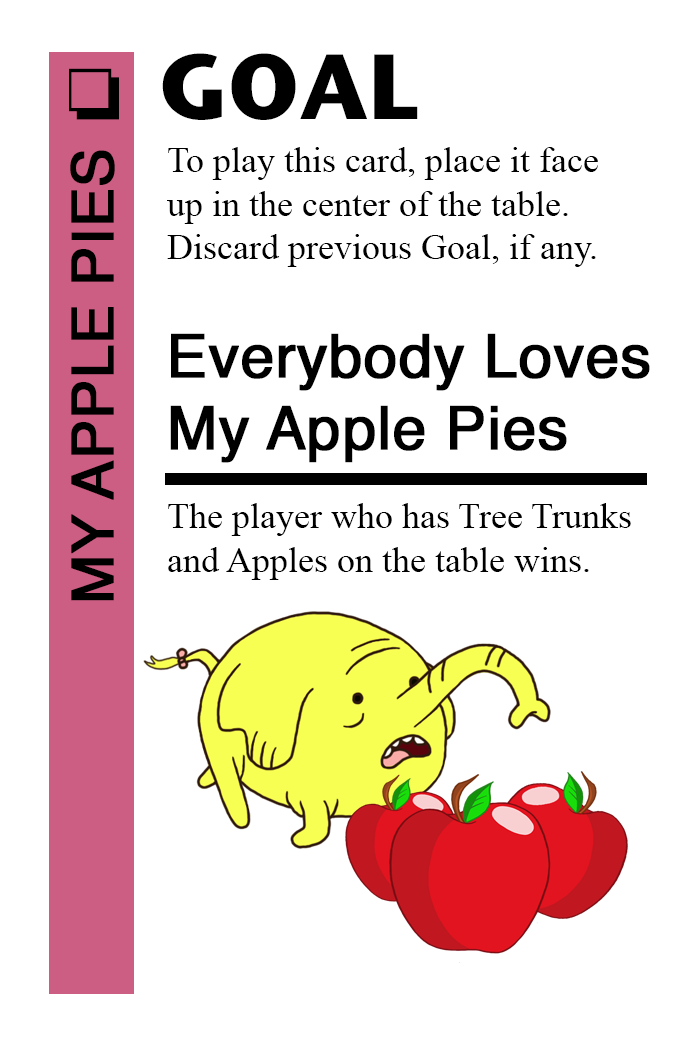
<style>
.page{position:relative;width:700px;height:1042px;background:#ffffff}
.page>*{position:absolute;margin:0}
.t1{font:92px "StoneSansITC-Bold";color:#000000}
.t2{font:72px "MS-Gothic";color:#000000}
.t3{font:58px "Helvetica";color:#000000;font-weight:bold}
.t4{font:36px "TimesNewRomanPSMT";color:#000000}
.t5{font:60px "Helvetica";color:#000000;font-weight:bold}
</style>
<div class="page">
<p class="t1" style="left:162px;top:53px;width:256px;height:67px">GOAL</p>
<p class="t2" style="left:69px;top:68px;width:50px;height:52px">❏</p>
<p class="t3" style="left:70px;top:150px;width:45px;height:451px;rotate:-90deg">MY APPLE PIES</p>
<p class="t4" style="left:167px;top:147px;width:431px;height:120px">To play this card, place it face<br>up in the center of the table.<br>Discard previous Goal, if any.</p>
<p class="t5" style="left:170px;top:333px;width:480px;height:130px">Everybody Loves<br>My Apple Pies</p>
<p class="t4" style="left:168px;top:503px;width:463px;height:77px">The player who has Tree Trunks<br>and Apples on the table wins.</p>
</div>
